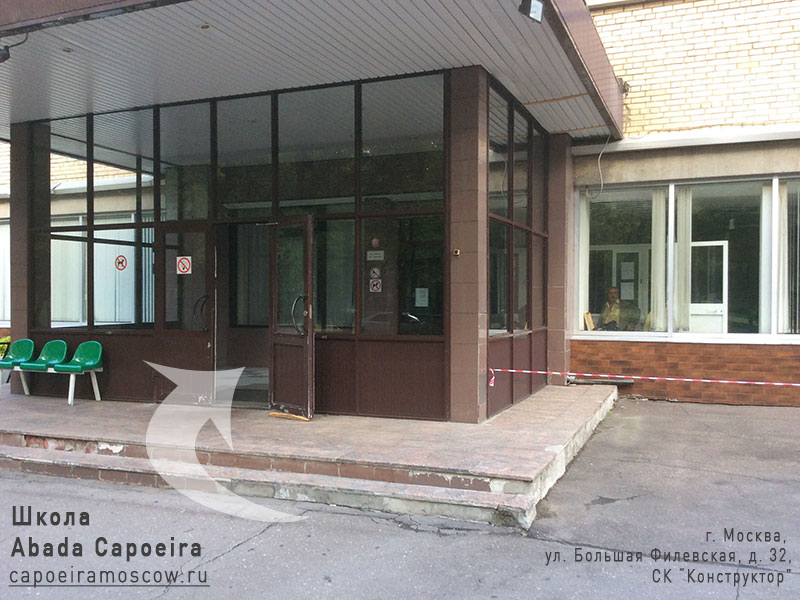
<style>
.page{position:relative;width:800px;height:600px}
.page>*{position:absolute;margin:0}
.t1{font:26.8px/30.7px "DINPro-Medium";letter-spacing:0.1em;color:#3f3f3f;font-weight:bold;scale:0.82 1}
.t2{font:17.6px/20.2px "DINPro-Light";letter-spacing:0.1em;color:#3f3f3f;font-weight:bold;scale:0.82 1}
.t3{font:22.9px "DINPro-Light";letter-spacing:0.1em;color:#3f3f3f;font-weight:bold;text-decoration:underline;scale:0.82 1}
</style>
<div class="page">
<p class="t1" style="left:10px;top:506px;width:191px;height:56px">Школа <br>Abada Capoeira</p>
<p class="t2" style="left:545px;top:528px;width:246px;height:59px;text-align:right">г. Москва, <br>ул. Большая Филевская, д. 32,<br> СК “Конструктор”</p>
<p class="t3" style="left:8px;top:566px;width:202px;height:22px">capoeiramoscow.ru</p>
</div>
